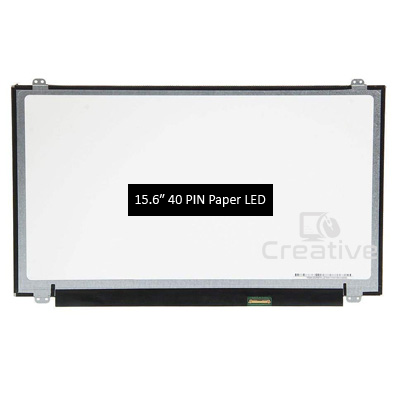
<style>
.page{position:relative;width:400px;height:400px;background:#ffffff}
.page>*{position:absolute;margin:0}
.t1{font:14px "Calibri";color:#ffffff}
</style>
<div class="page">
<p class="t1" style="left:135px;top:194px;width:131px;height:13px">15.6″ 40 PIN Paper LED</p>
</div>
